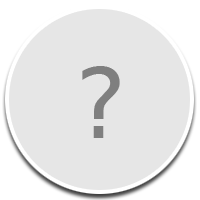
<style>
.page{position:relative;width:200px;height:200px;background:#e6e6e6}
.page>*{position:absolute;margin:0}
.t1{font:96px "Menlo-Regular";color:#7f7f7f}
</style>
<div class="page">
<p class="t1" style="left:82px;top:66px;width:38px;height:72px">?</p>
</div>
